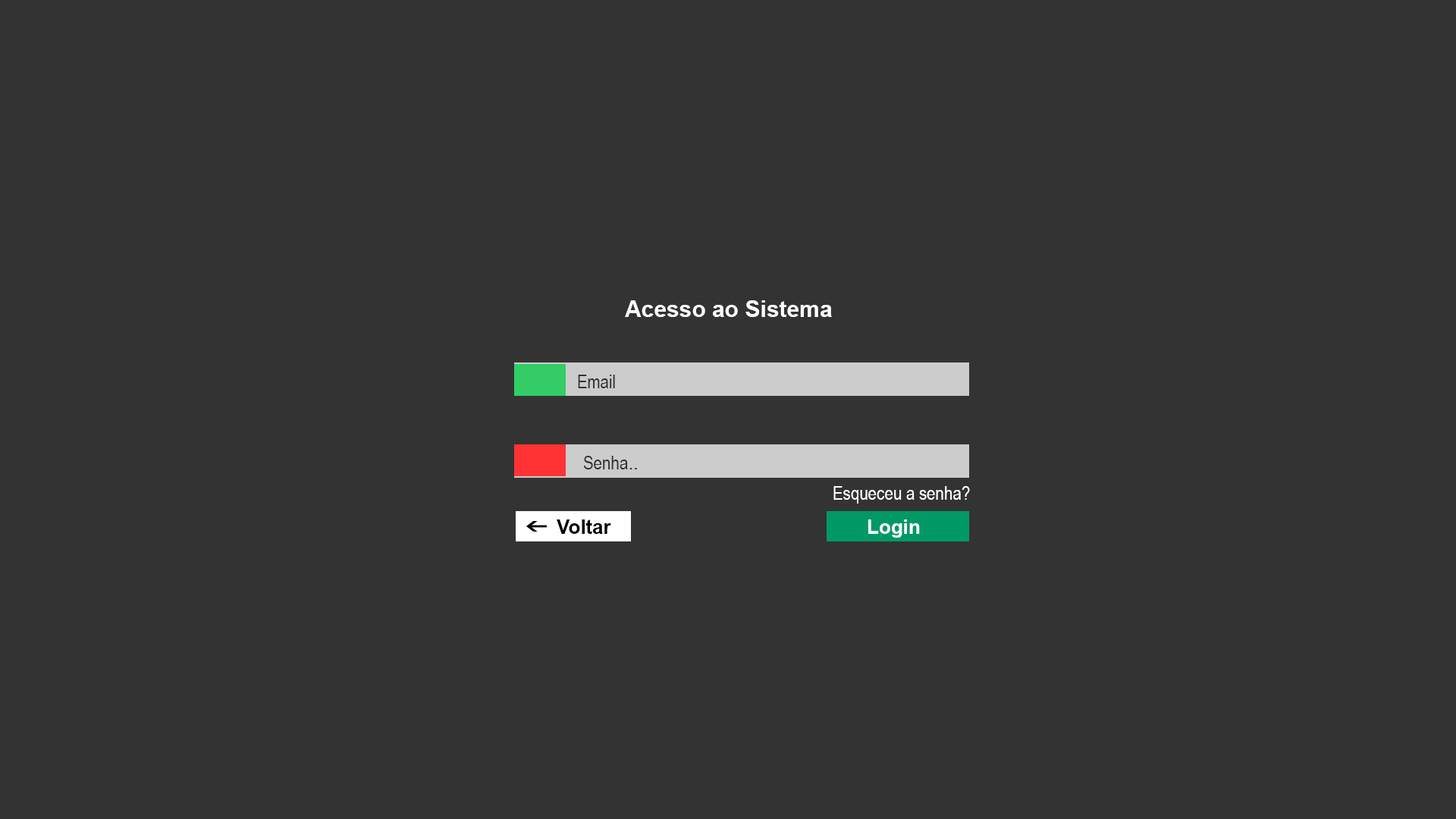
<style>
.page{position:relative;width:1456px;height:819px;background:#333333}
.page>*{position:absolute;margin:0}
.t1{font:22.7px "Arial-BoldMT";color:#ffffff}
.t2{font:19px "ArialNarrow";color:#333333}
.t3{font:22.7px "ArialNarrow";color:#333333}
.t4{font:19px "ArialNarrow";color:#ffffff}
.t5{font:19.7px "Arial-BoldMT";color:#000000}
.t6{font:19.7px "Arial-BoldMT";color:#ffffff}
</style>
<div class="page">
<p class="t1" style="left:625px;top:300px;width:207px;height:17px">Acesso ao Sistema</p>
<p class="t2" style="left:578px;top:375px;width:37px;height:13px">Email</p>
<p class="t2" style="left:583px;top:456px;width:54px;height:13px">Senha<span class="t3">..</span></p>
<p class="t4" style="left:833px;top:486px;width:137px;height:18px">Esqueceu a senha?</p>
<p class="t5" style="left:557px;top:519px;width:54px;height:15px">Voltar</p>
<p class="t6" style="left:868px;top:519px;width:52px;height:19px">Login</p>
</div>
